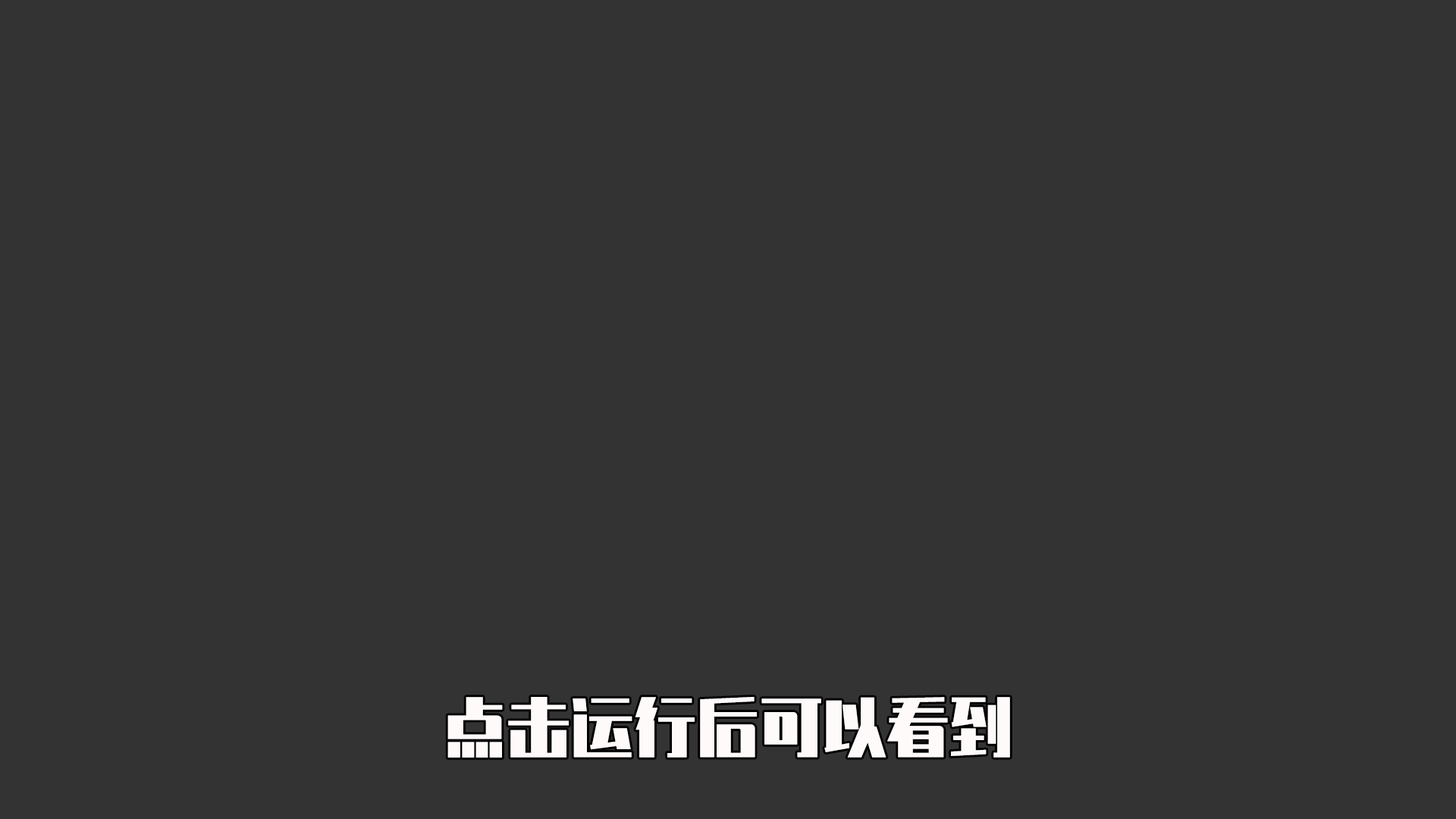
<style>
.page{position:relative;width:1456px;height:819px;background:#333333}
.page>*{position:absolute;margin:0}
.t1{font:63.2px "ZhenyanGB-Regular";color:#fefafa}
</style>
<div class="page">
<p class="t1" style="left:447px;top:697px;width:563px;height:61px">点击运行后可以看到</p>
</div>
